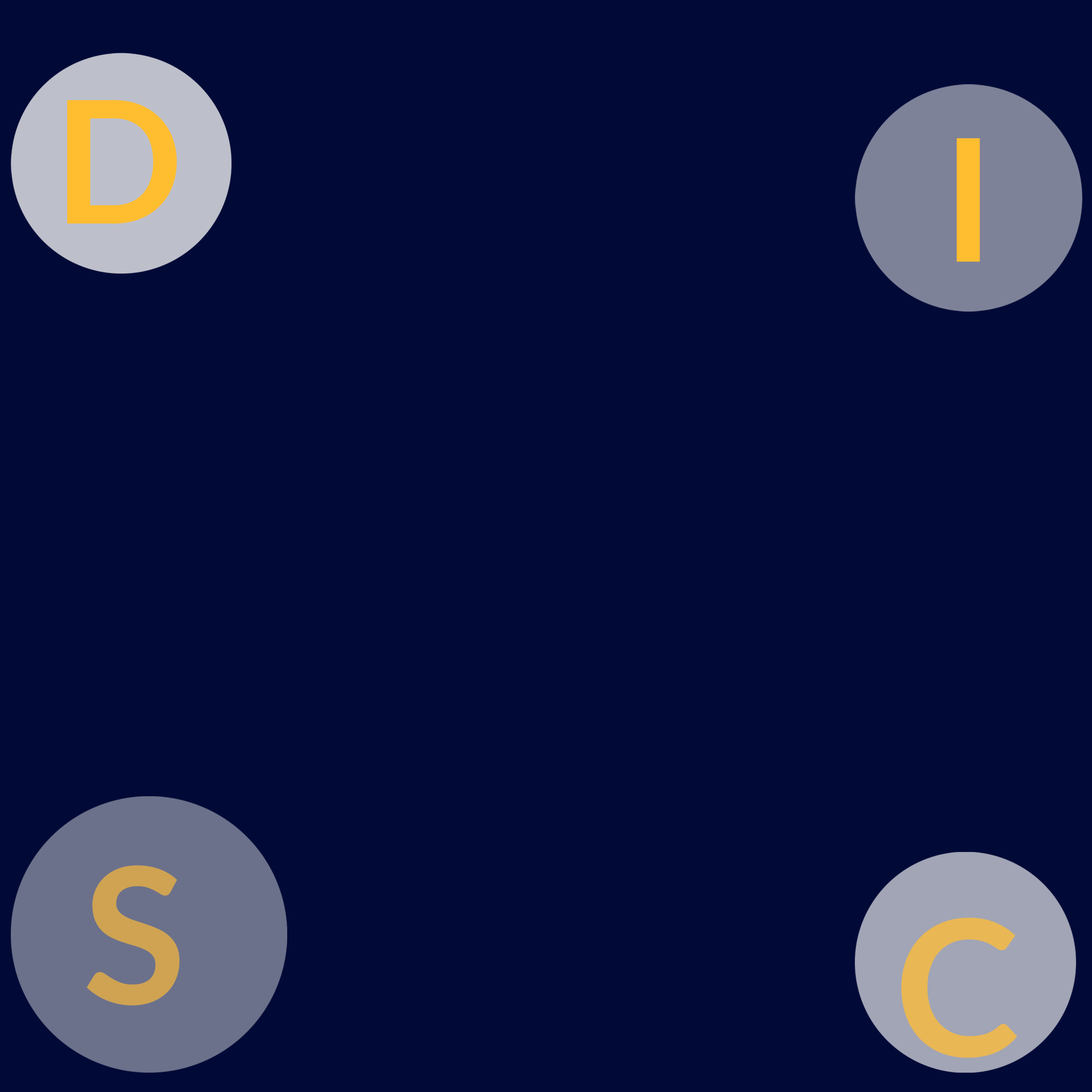
<style>
.page{position:relative;width:1092px;height:1092px;background:#010a37}
.page>*{position:absolute;margin:0}
.t1{font:170.6px "Lato-Bold";color:#ffbd30}
.t2{font:189.6px "Lato-Bold";color:#cfa352}
.t3{font:189.6px "Lato-Bold";color:#e9b754}
</style>
<div class="page">
<p class="t1" style="left:67px;top:100px;width:110px;height:124px">D</p>
<p class="t1" style="left:957px;top:138px;width:23px;height:124px">I</p>
<p class="t2" style="left:86px;top:865px;width:94px;height:141px">S</p>
<p class="t3" style="left:901px;top:917px;width:116px;height:141px">C</p>
</div>
